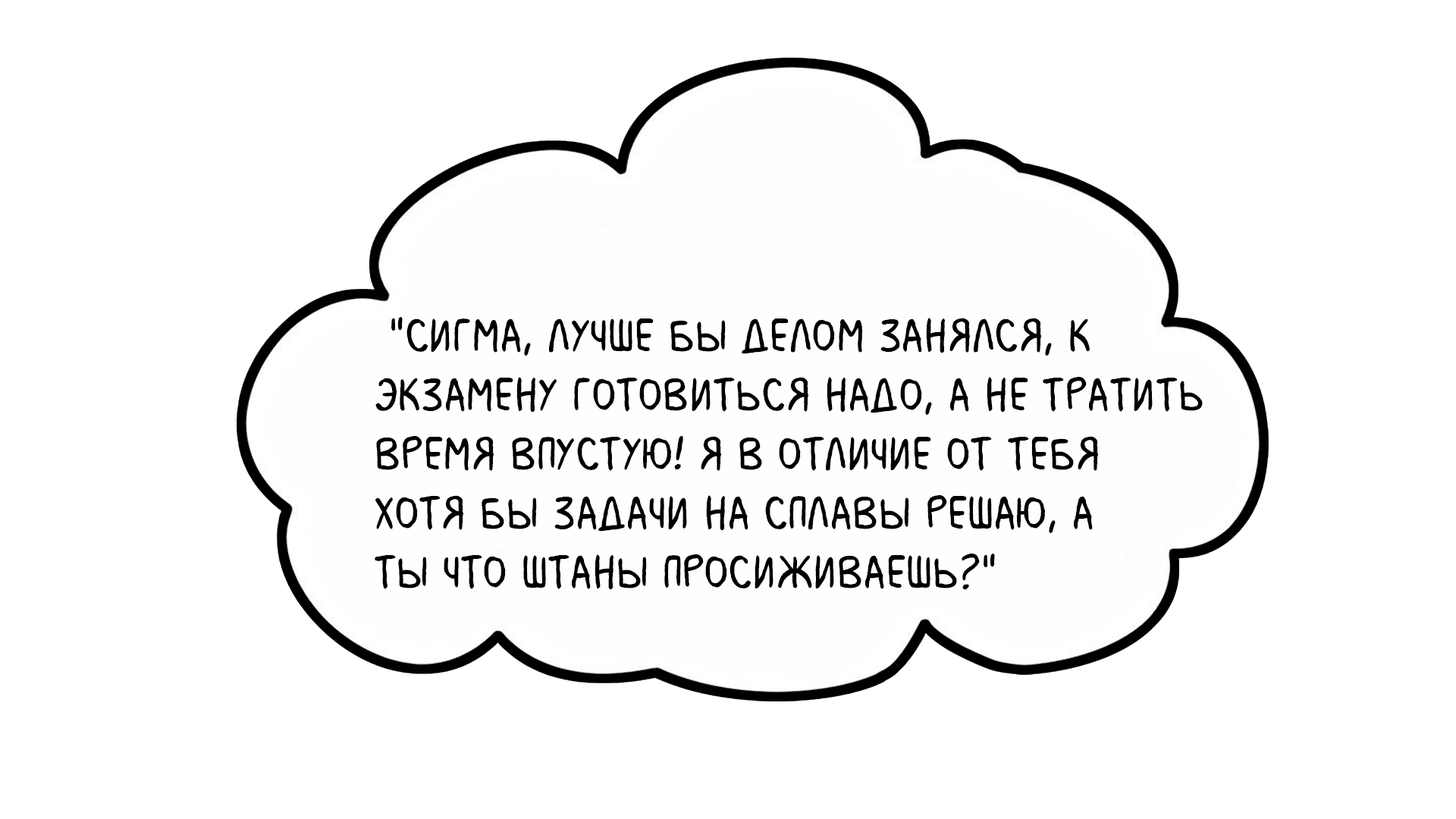
<style>
.page{position:relative;width:1456px;height:819px;background:#ffffff}
.page>*{position:absolute;margin:0}
.t1{font:49.3px "MilkMustacheBB";color:#000000}
</style>
<div class="page">
<p class="t1" style="left:375px;top:317px;width:828px;height:273px">"Сигма, лучше бы делом занялся, к <br>экзамену готовиться надо, а не тратить <br>время впустую! Я в отличие от тебя <br>хотя бы задачи на сплавы решаю, а <br>ты что штаны просиживаешь?"</p>
</div>
